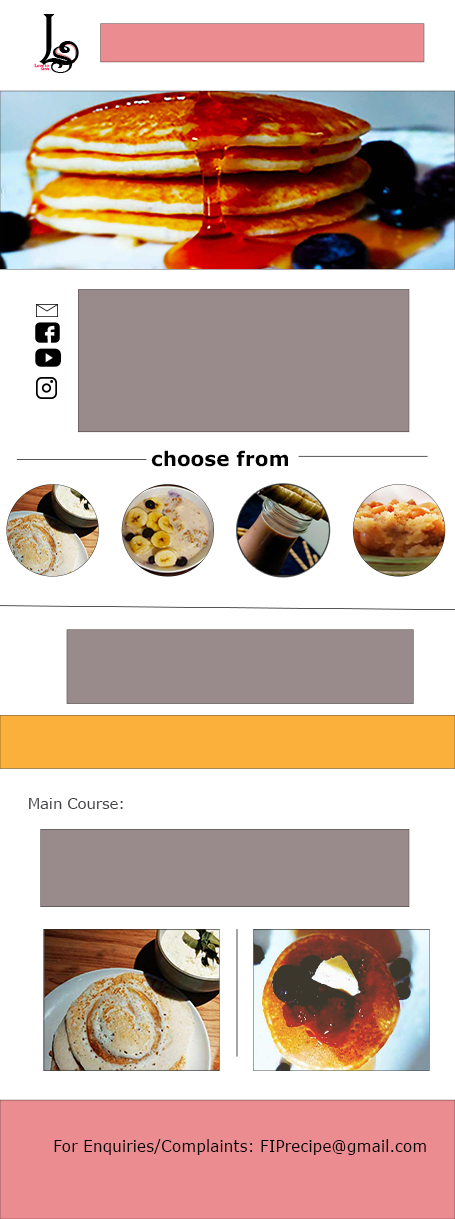
<style>
.page{position:relative;width:455px;height:1219px;background:#ffffff}
.page>*{position:absolute;margin:0}
.t1{font:20px "Verdana-Bold";color:#000000}
.t2{font:14.7px "Verdana";color:#434347}
.t3{font:16px "Verdana";color:#000000;scale:0.96 1}
</style>
<div class="page">
<p class="t1" style="left:151px;top:450px;width:137px;height:17px">choose from</p>
<p class="t2" style="left:29px;top:798px;width:94px;height:11px">Main Course:</p>
<p class="t3" style="left:54px;top:1139px;width:372px;height:16px">For Enquiries/Complaints: FIPrecipe@gmail.com</p>
</div>
